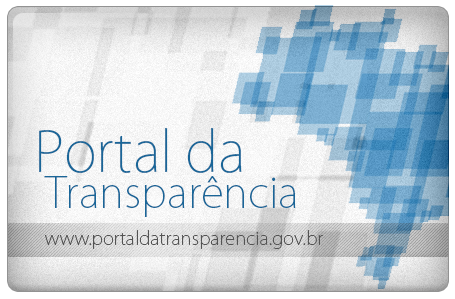
<style>
.page{position:relative;width:455px;height:299px}
.page>*{position:absolute;margin:0}
.t1{font:55.2px "KozGoPro-ExtraLight";color:#1a6698}
.t2{font:41.4px "KozGoPro-ExtraLight";color:#1a6698}
.t3{font:18.1px "KozGoPro-ExtraLight";color:#535353}
</style>
<div class="page">
<p class="t1" style="left:39px;top:128px;width:203px;height:45px">Portal da</p>
<p class="t2" style="left:44px;top:176px;width:252px;height:41px">Transparência</p>
<p class="t3" style="left:45px;top:230px;width:278px;height:19px">www.portaldatransparencia.gov.br</p>
</div>
